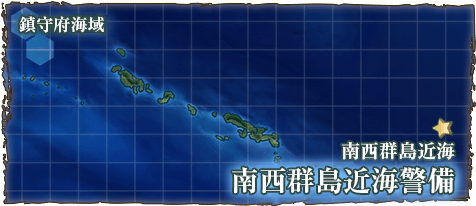
<style>
.page{position:relative;width:476px;height:206px}
.page>*{position:absolute;margin:0}
.t1{font:17px "RyuminPr6N-ExBold";color:#ffffff}
.t2{font:19px "RyuminPro-ExBold";color:#ffffff}
.t3{font:28px "RyuminPro-ExBold";color:#ffffff}
</style>
<div class="page">
<p class="t1" style="left:19px;top:16px;width:85px;height:17px">鎮守府海域</p>
<p class="t2" style="left:341px;top:141px;width:114px;height:19px">南西群島近海</p>
<p class="t3" style="left:232px;top:167px;width:222px;height:27px">南西群島近海警備</p>
</div>
